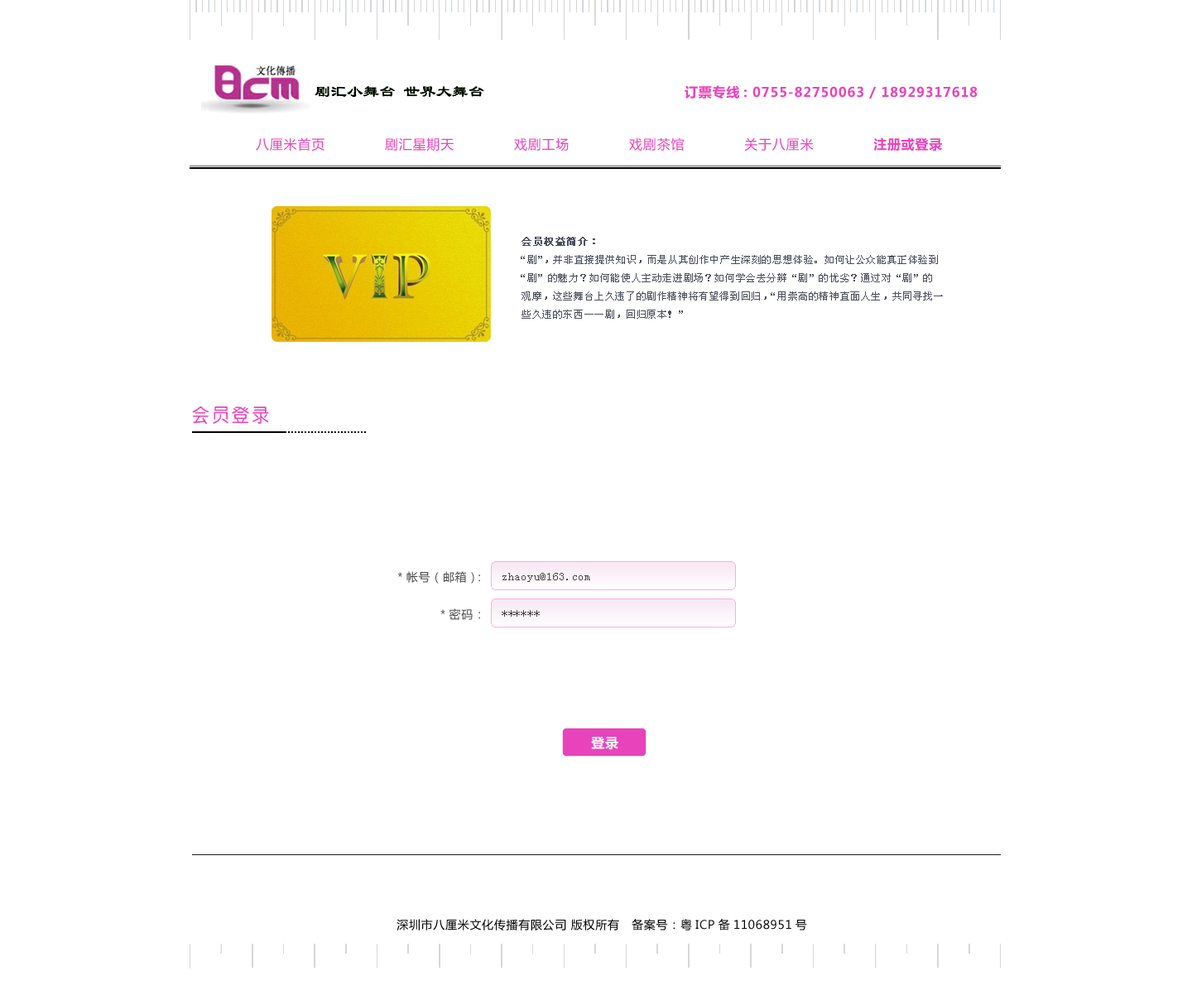
<style>
.page{position:relative;width:1192px;height:1000px;background:#ffffff}
.page>*{position:absolute;margin:0}
.t1{font:13.2px "MicrosoftYaHei";letter-spacing:0.05em;color:#e843bb}
.t2{font:9.9px/18.2px "SimSun";letter-spacing:0.05em;color:#4b4e5b}
.t3{font:9.9px/18.2px "SimSun";letter-spacing:0.05em;color:#4b4e5b;font-weight:bold}
.t4{font:19px "ÖÐÔ²Ìå-Regular";letter-spacing:0.05em;color:#e843bb}
.t5{font:11.6px/37.3px "MicrosoftYaHei";letter-spacing:0.05em;color:#484848}
.t6{font:11.6px/37.3px "SimSun";letter-spacing:0.05em;color:#494646}
.t7{font:13.2px "MicrosoftYaHei";letter-spacing:0.05em;color:#ffffff}
.t8{font:11.6px "MicrosoftYaHei";letter-spacing:0.05em;color:#000000}
</style>
<div class="page">
<p class="t1" style="left:685px;top:85px;width:293px;height:14px">订票专线: 0755-82750063 / 18929317618</p>
<p class="t1" style="left:256px;top:137px;width:686px;height:15px">八厘米首页             剧汇星期天             戏剧工场             戏剧茶馆             关于八厘米             注册或登录</p>
<p class="t2" style="left:521px;top:237px;width:422px;height:82px"><span class="t3">会员权益简介：<br></span>“剧”，并非直接提供知识，而是从其创作中产生深刻的思想体验。如何让公众能真正体验到<br>“剧”的魅力？如何能使人主动走进剧场？如何学会去分辨“剧”的优劣？通过对“剧”的<br>观摩，这些舞台上久违了的剧作精神将有望得到回归，“用崇高的精神直面人生，共同寻找一<br>些久违的东西——剧，回归原本！”</p>
<p class="t4" style="left:192px;top:407px;width:77px;height:17px">会员登录</p>
<p class="t5" style="left:397px;top:571px;width:83px;height:49px;text-align:right">*帐号（邮箱）：<br>*密码：</p>
<p class="t6" style="left:502px;top:573px;width:88px;height:44px">zhaoyu@163.com<br>******</p>
<p class="t7" style="left:591px;top:736px;width:27px;height:14px">登录</p>
<p class="t8" style="left:397px;top:919px;width:410px;height:12px">深圳市八厘米文化传播有限公司 版权所有   备案号：粤ICP备11068951号</p>
</div>
